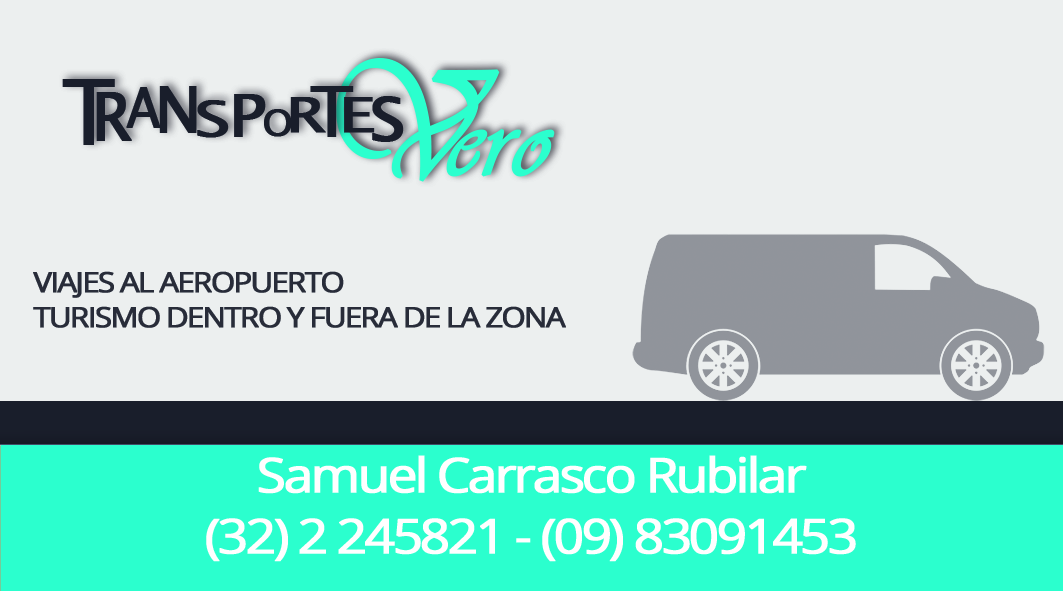
<style>
.page{position:relative;width:1063px;height:591px;background:#ecefef}
.page>*{position:absolute;margin:0}
.t1{font:108.3px "Vivaldii";color:#2bffce;font-weight:bold}
.t2{font:161px "Vivaldii";letter-spacing:-0.22em;color:#2bffce;font-weight:bold;scale:0.84 1}
.t3{font:90px "LucidaSansUnicode";letter-spacing:-0.3em;color:#191e2b;font-weight:bold;scale:0.9 1}
.t4{font:66.9px "LucidaSansUnicode";letter-spacing:-0.104em;color:#191e2b;font-weight:bold;scale:0.93 1}
.t5{font:55.6px "LucidaSansUnicode";letter-spacing:-0.144em;color:#191e2b;font-weight:bold;scale:0.89 1}
.t6{font:63.8px "LucidaSansUnicode";letter-spacing:-0.124em;color:#191e2b;font-weight:bold}
.t7{font:47.5px "LucidaSansUnicode";letter-spacing:-0.064em;color:#191e2b;font-weight:bold;scale:1.39 1}
.t8{font:57.5px "LucidaSansUnicode";letter-spacing:-0.064em;color:#191e2b;font-weight:bold;scale:1.15 1}
.t9{font:38px "LucidaSansUnicode";letter-spacing:-0.195em;color:#191e2b;font-weight:bold}
.t10{font:47.5px "LucidaSansUnicode";letter-spacing:-0.275em;color:#191e2b;font-weight:bold;scale:1.33 1}
.t11{font:68.8px "LucidaSansUnicode";letter-spacing:-0.235em;color:#191e2b;font-weight:bold;scale:0.96 1}
.t12{font:47.5px "LucidaSansUnicode";letter-spacing:-0.102em;color:#191e2b;font-weight:bold;scale:1.39 1}
.t13{font:60px "LucidaSansUnicode";letter-spacing:-0.075em;color:#191e2b;font-weight:bold;scale:1.1 1}
.t14{font:28px "OpenSans";letter-spacing:-0.075em;color:#191e2b;font-weight:bold;scale:1.1 1}
.t15{font:48px "OpenSans";letter-spacing:-0.075em;color:#ffffff;font-weight:bold;scale:1.1 1}
</style>
<div class="page">
<p class="t1" style="left:336px;top:58px;width:219px;height:124px"><span class="t2">V</span>ero</p>
<p class="t3" style="left:62px;top:79px;width:342px;height:66px">T<span class="t4">R</span><span class="t5">A</span><span class="t6">N</span><span class="t7">S</span><span class="t8">P</span><span class="t9">O</span><span class="t10">R</span><span class="t11">T</span><span class="t12">E</span><span class="t13">S</span></p>
<p class="t14" style="left:33px;top:271px;width:533px;height:57px">VIAJES AL AEROPUERTO<br>TURISMO DENTRO Y FUERA DE LA ZONA</p>
<p class="t15" style="left:258px;top:455px;width:549px;height:39px">Samuel Carrasco Rubilar</p>
<p class="t15" style="left:206px;top:518px;width:650px;height:44px">(32) 2 245821 - (09) 83091453</p>
</div>
